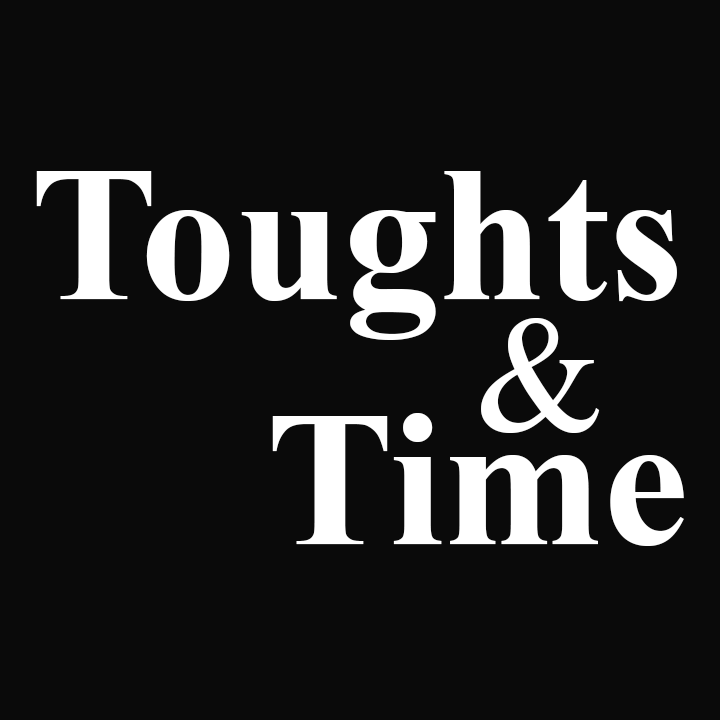
<style>
.page{position:relative;width:720px;height:720px;background:#0a0a0a}
.page>*{position:absolute;margin:0}
.t1{font:191.7px "TimesNewRomanPS-BoldMT";color:#ffffff}
.t2{font:166.2px "TimesNewRomanPSMT";color:#ffffff}
</style>
<div class="page">
<p class="t1" style="left:36px;top:171px;width:641px;height:169px">Toughts</p>
<p class="t2" style="left:481px;top:318px;width:119px;height:115px">&amp;</p>
<p class="t1" style="left:272px;top:413px;width:412px;height:133px">Time</p>
</div>
